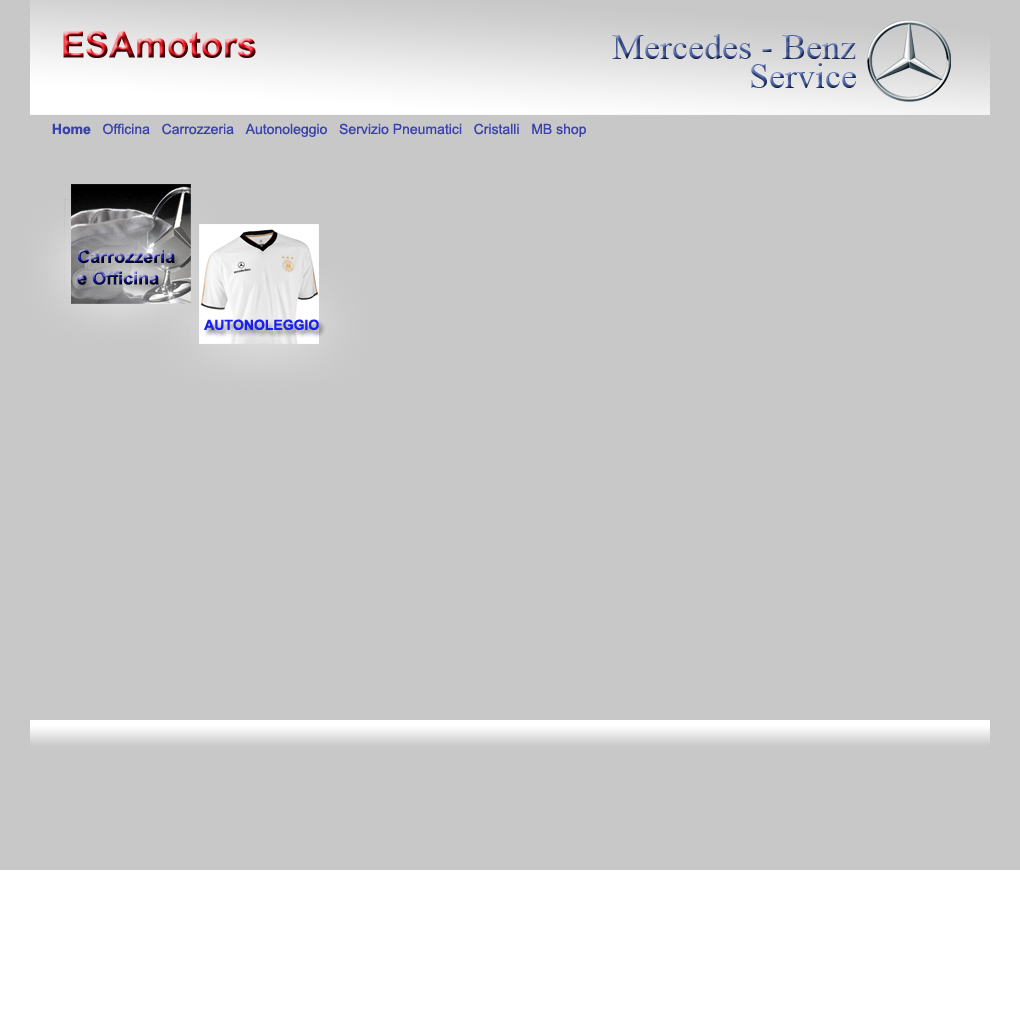
<style>
.page{position:relative;width:1020px;height:1020px;background:#c8c8c8}
.page>*{position:absolute;margin:0}
.t1{font:36px "Arial-BoldMT"}
.t2{font:36px "TimesNewRomanPSMT"}
.t3{font:18px "Arial-BoldMT"}
.t4{font:14px "Arial-BoldMT";color:#1b20ed}
</style>
<div class="page">
<p class="t1" style="left:63px;top:31px;width:193px;height:27px">ESAmotors</p>
<p class="t2" style="left:612px;top:34px;width:244px;height:25px">Mercedes - Benz</p>
<p class="t2" style="left:751px;top:63px;width:105px;height:25px">Service</p>
<p class="t3" style="left:77px;top:249px;width:98px;height:36px">Carrozzeria <br>e Officina</p>
<p class="t4" style="left:204px;top:319px;width:115px;height:11px">AUTONOLEGGIO</p>
</div>
